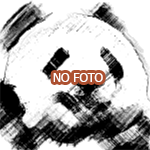
<style>
.page{position:relative;width:150px;height:150px;background:#ffffff}
.page>*{position:absolute;margin:0}
.t1{font:12px "Tahoma";color:#ffffff}
</style>
<div class="page">
<p class="t1" style="left:53px;top:73px;width:50px;height:9px">NO FOTO</p>
</div>
